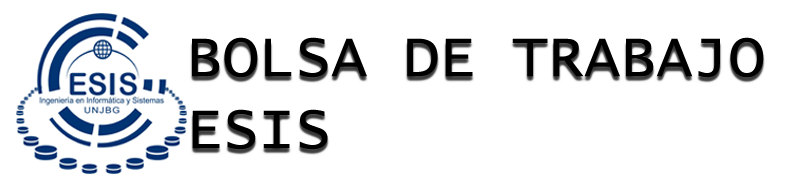
<style>
.page{position:relative;width:794px;height:180px;background:#ffffff}
.page>*{position:absolute;margin:0}
.t1{font:60px "LucidaConsole";color:#000000}
</style>
<div class="page">
<p class="t1" style="left:192px;top:37px;width:572px;height:113px">BOLSA DE TRABAJO<br>ESIS</p>
</div>
